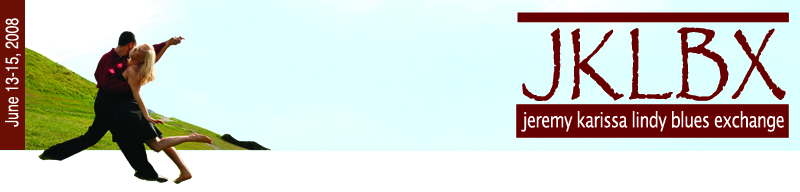
<style>
.page{position:relative;width:800px;height:192px;background:#ffffff}
.page>*{position:absolute;margin:0}
.t1{font:18.2px "Helvetica";color:#ffffff;scale:0.77 1}
.t2{font:105px "Papyrus";color:#660000;scale:0.77 1}
.t3{font:21px "LucidaGrande";letter-spacing:-0.04em;color:#fffeff;scale:0.77 1}
</style>
<div class="page">
<p class="t1" style="left:5px;top:18px;width:16px;height:109px;rotate:-90deg">June 13-15, 2008</p>
<p class="t2" style="left:522px;top:27px;width:264px;height:74px">JKLBX</p>
<p class="t3" style="left:521px;top:111px;width:263px;height:21px">jeremy karissa lindy blues exchange</p>
</div>
